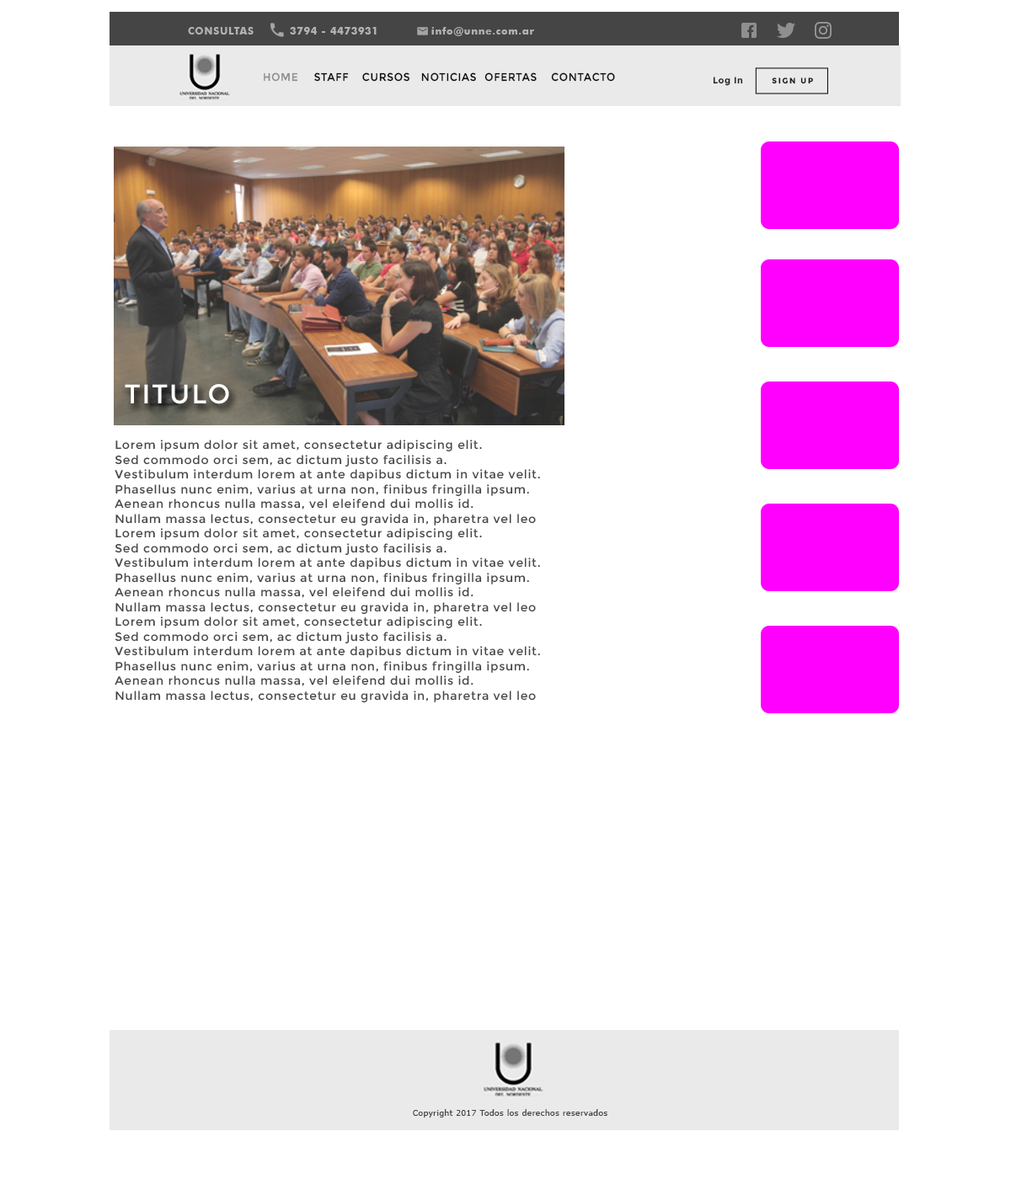
<style>
.page{position:relative;width:1011px;height:1179px;background:#ffffff}
.page>*{position:absolute;margin:0}
.t1{font:10.1px "FuturaBT-Bold";letter-spacing:0.06em;color:#b2b2b2}
.t2{font:11px "Montserrat-Regular";letter-spacing:0.06em;color:#8f8e8e;text-transform:uppercase;scale:0.93 1}
.t3{font:11px "Montserrat-Regular";letter-spacing:0.06em;color:#0a0a0a;text-transform:uppercase;scale:0.93 1}
.t4{font:9.1px "Montserrat-Bold";letter-spacing:0.06em;color:#1f1d1d}
.t5{font:7.8px "Montserrat-Bold";letter-spacing:0.2em;color:#191717;scale:0.97 1}
.t6{font:27px "Montserrat-Regular";letter-spacing:0.06em;color:#ffffff}
.t7{font:11.8px/14.7px "Montserrat-Regular";letter-spacing:0.06em;color:#454545}
.t8{font:8.5px "Tahoma";letter-spacing:0.06em;color:#454647}
</style>
<div class="page">
<p class="t1" style="left:188px;top:27px;width:66px;height:8px">CONSULTAS</p>
<p class="t1" style="left:290px;top:27px;width:87px;height:8px">3794 - 4473931</p>
<p class="t1" style="left:431px;top:27px;width:103px;height:9px">info@unne.com.ar</p>
<p class="t2" style="left:264px;top:72px;width:34px;height:10px">Home</p>
<p class="t3" style="left:314px;top:72px;width:35px;height:10px">Staff</p>
<p class="t3" style="left:362px;top:72px;width:47px;height:10px">Cursos</p>
<p class="t3" style="left:421px;top:72px;width:55px;height:10px">Noticias</p>
<p class="t3" style="left:484px;top:72px;width:53px;height:10px">ofertas</p>
<p class="t3" style="left:551px;top:72px;width:64px;height:10px">Contacto</p>
<p class="t4" style="left:713px;top:77px;width:30px;height:9px">Log In</p>
<p class="t5" style="left:772px;top:78px;width:41px;height:6px">SIGN UP</p>
<p class="t6" style="left:125px;top:384px;width:104px;height:20px">TITULO</p>
<p class="t7" style="left:115px;top:440px;width:425px;height:87px">Lorem ipsum dolor sit amet, consectetur adipiscing elit. <br>Sed commodo orci sem, ac dictum justo facilisis a. <br>Vestibulum interdum lorem at ante dapibus dictum in vitae velit. <br>Phasellus nunc enim, varius at urna non, finibus fringilla ipsum. <br>Aenean rhoncus nulla massa, vel eleifend dui mollis id. <br>Nullam massa lectus, consectetur eu gravida in, pharetra vel leo</p>
<p class="t7" style="left:115px;top:528px;width:425px;height:87px">Lorem ipsum dolor sit amet, consectetur adipiscing elit. <br>Sed commodo orci sem, ac dictum justo facilisis a. <br>Vestibulum interdum lorem at ante dapibus dictum in vitae velit. <br>Phasellus nunc enim, varius at urna non, finibus fringilla ipsum. <br>Aenean rhoncus nulla massa, vel eleifend dui mollis id. <br>Nullam massa lectus, consectetur eu gravida in, pharetra vel leo</p>
<p class="t7" style="left:115px;top:617px;width:425px;height:86px">Lorem ipsum dolor sit amet, consectetur adipiscing elit. <br>Sed commodo orci sem, ac dictum justo facilisis a. <br>Vestibulum interdum lorem at ante dapibus dictum in vitae velit. <br>Phasellus nunc enim, varius at urna non, finibus fringilla ipsum. <br>Aenean rhoncus nulla massa, vel eleifend dui mollis id. <br>Nullam massa lectus, consectetur eu gravida in, pharetra vel leo</p>
<p class="t8" style="left:413px;top:1110px;width:194px;height:8px">Copyright 2017 Todos los derechos reservados</p>
</div>
